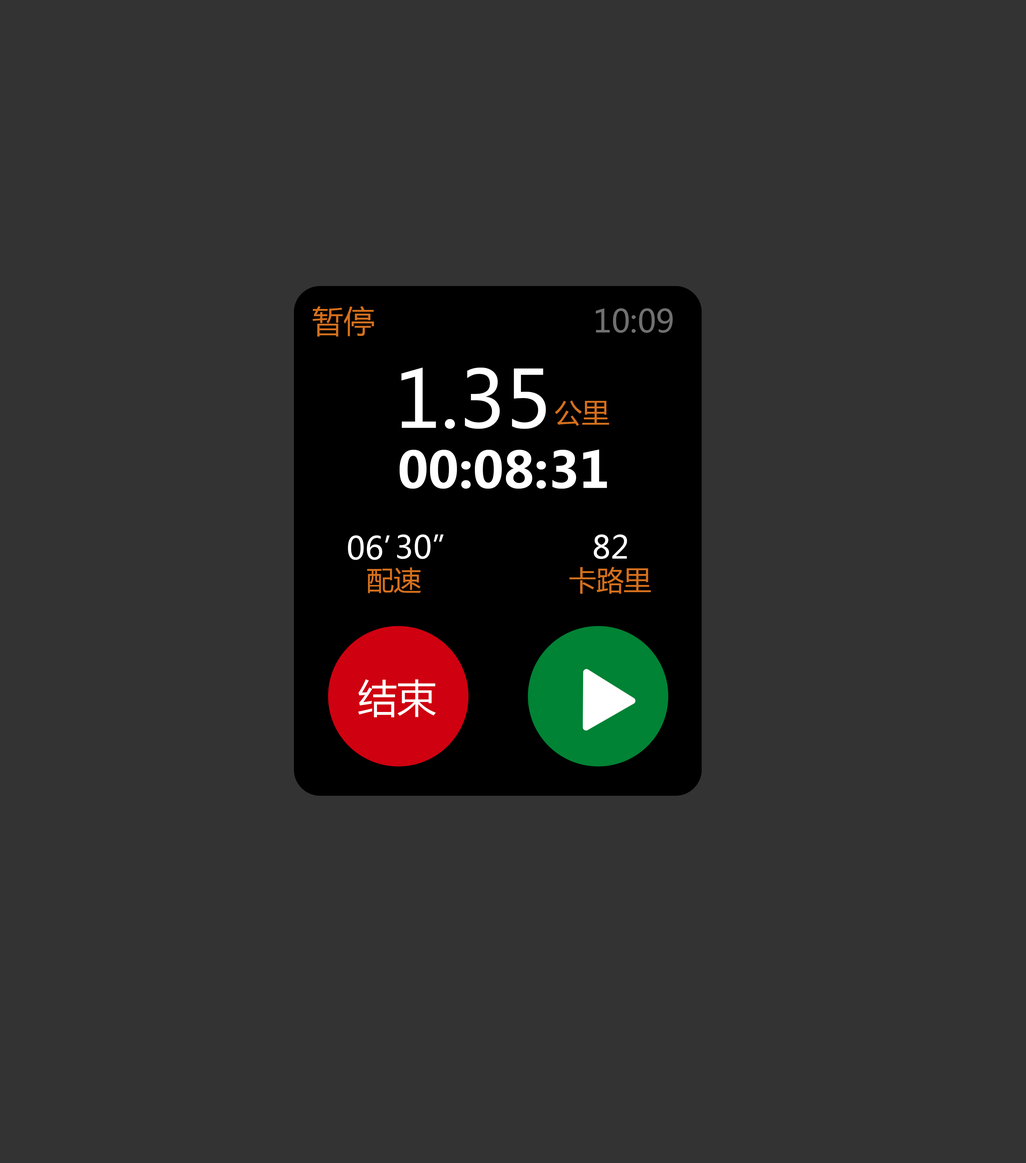
<style>
.page{position:relative;width:1026px;height:1163px;background:#333333}
.page>*{position:absolute;margin:0}
.t1{font:31.4px "MicrosoftYaHei";color:#e37820}
.t2{font:31.4px "MicrosoftYaHei";color:#717071}
.t3{font:78.4px "MicrosoftYaHei";color:#ffffff}
.t4{font:27.4px "MicrosoftYaHei";color:#e37820}
.t5{font:49.6px "MicrosoftYaHei-Bold";color:#ffffff}
.t6{font:31.4px "MicrosoftYaHei";color:#ffffff}
.t7{font:39.2px "MicrosoftYaHei";color:#ffffff}
</style>
<div class="page">
<p class="t1" style="left:312px;top:306px;width:62px;height:30px;opacity:0.9">暂停</p>
<p class="t2" style="left:595px;top:308px;width:78px;height:25px">10:09</p>
<p class="t3" style="left:401px;top:367px;width:145px;height:62px">1.35</p>
<p class="t4" style="left:555px;top:400px;width:54px;height:26px;opacity:0.9">公里</p>
<p class="t5" style="left:399px;top:449px;width:208px;height:40px">00:08:31</p>
<p class="t6" style="left:348px;top:535px;width:42px;height:25px">06’</p>
<p class="t6" style="left:397px;top:534px;width:46px;height:25px">30”</p>
<p class="t6" style="left:594px;top:534px;width:33px;height:25px">82</p>
<p class="t4" style="left:367px;top:567px;width:54px;height:26px;opacity:0.9">配速</p>
<p class="t4" style="left:569px;top:567px;width:82px;height:27px;opacity:0.9">卡路里</p>
<p class="t7" style="left:358px;top:679px;width:78px;height:38px">结束</p>
</div>
